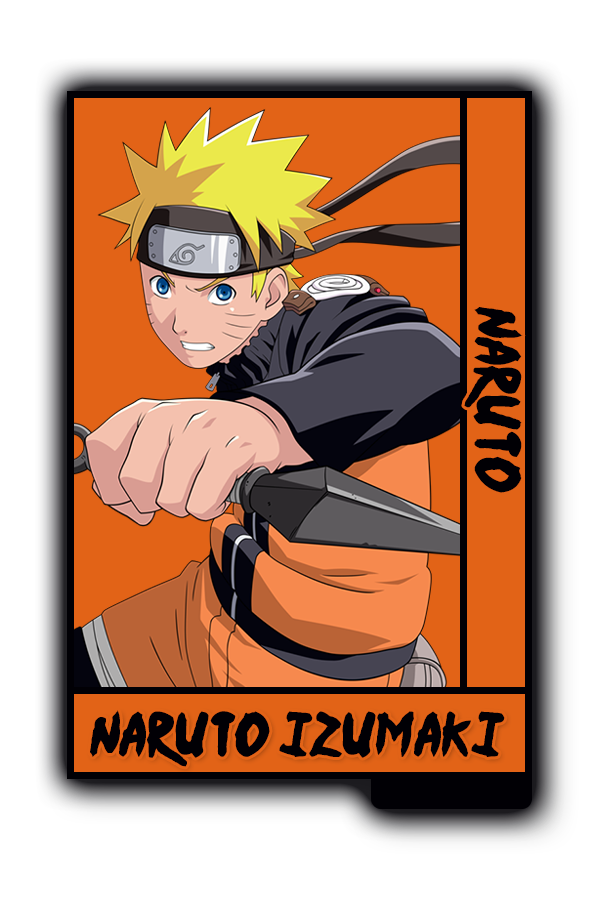
<style>
.page{position:relative;width:600px;height:900px;background:#e26317}
.page>*{position:absolute;margin:0}
.t1{font:52px "Ninja-Naruto";color:#010005}
.t2{font:50.5px "Ninja-Naruto";color:#010005}
</style>
<div class="page">
<p class="t1" style="left:464px;top:307px;width:59px;height:186px;rotate:90deg">Naruto</p>
<p class="t2" style="left:90px;top:710px;width:415px;height:57px">Naruto Izumaki</p>
</div>
